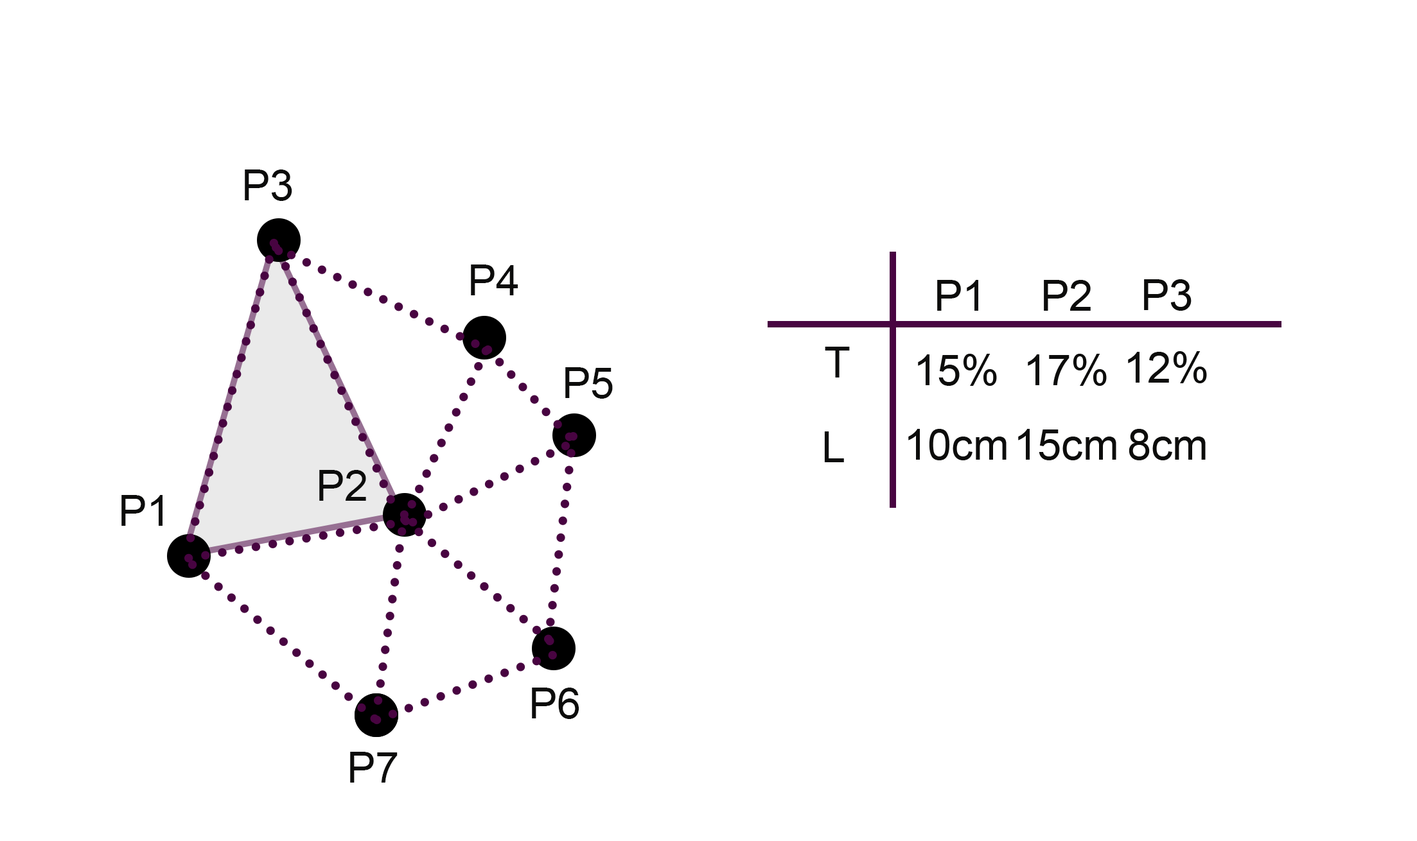
<style>
.page{position:relative;width:1417px;height:841px;background:#ffffff}
.page>*{position:absolute;margin:0}
.t1{font:42.8px "ArialMT";color:#0c0c0b}
</style>
<div class="page">
<p class="t1" style="left:245px;top:170px;width:47px;height:31px">P3</p>
<p class="t1" style="left:471px;top:265px;width:47px;height:30px">P4</p>
<p class="t1" style="left:825px;top:347px;width:25px;height:31px">T</p>
<p class="t1" style="left:565px;top:367px;width:48px;height:32px">P5</p>
<p class="t1" style="left:824px;top:432px;width:20px;height:30px">L</p>
<p class="t1" style="left:319px;top:470px;width:47px;height:31px">P2</p>
<p class="t1" style="left:121px;top:495px;width:42px;height:31px">P1</p>
<p class="t1" style="left:532px;top:688px;width:47px;height:31px">P6</p>
<p class="t1" style="left:350px;top:752px;width:48px;height:31px">P7</p>
</div>
